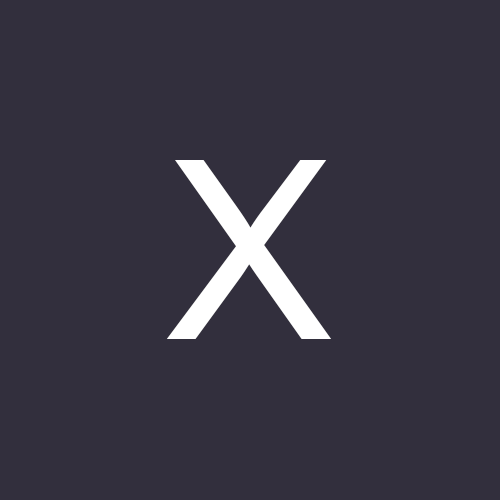
<style>
.page{position:relative;width:500px;height:500px;background:#322f3d}
.page>*{position:absolute;margin:0}
.t1{font:250px "ArialMT";color:#ffffff}
</style>
<div class="page">
<p class="t1" style="left:166px;top:160px;width:166px;height:179px">X</p>
</div>
